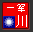
<style>
.page{position:relative;width:33px;height:32px;background:#f20000}
.page>*{position:absolute;margin:0}
.t1{font:10.4px "SimSun";color:#ffffff}
.t2{font:11.7px "SimSun";color:#ffffff}
</style>
<div class="page">
<p class="t1" style="left:7px;top:4px;width:18px;height:8px">一军</p>
<p class="t2" style="left:16px;top:15px;width:11px;height:12px">川</p>
</div>
